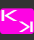
<style>
.page{position:relative;width:34px;height:40px;background:#fd04e3}
.page>*{position:absolute;margin:0}
.t1{font:15.1px "GoodTimes";color:#fafafc;scale:1.46 1}
.t2{font:14.6px "GoodTimes";color:#fcfcfe;scale:1.32 1}
</style>
<div class="page">
<p class="t1" style="left:1px;top:10px;width:17px;height:11px">k</p>
<p class="t2" style="left:19px;top:21px;width:14px;height:11px;rotate:180deg">k</p>
</div>
